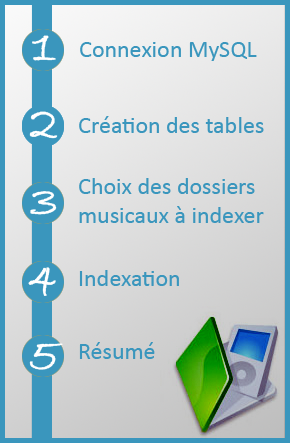
<style>
.page{position:relative;width:290px;height:443px}
.page>*{position:absolute;margin:0}
.t1{font:48px "BradleyHandITC";color:#ffffff;font-weight:bold}
.t2{font:24px "Calibri";color:#3a96bd}
</style>
<div class="page">
<p class="t1" style="left:32px;top:35px;width:24px;height:26px">1</p>
<p class="t2" style="left:80px;top:42px;width:177px;height:19px">Connexion MySQL</p>
<p class="t1" style="left:29px;top:111px;width:29px;height:28px">2</p>
<p class="t2" style="left:79px;top:116px;width:185px;height:17px">Création des tables</p>
<p class="t2" style="left:79px;top:178px;width:185px;height:45px">Choix des dossiers<br>musicaux à indexer</p>
<p class="t1" style="left:30px;top:191px;width:27px;height:24px">3</p>
<p class="t1" style="left:28px;top:267px;width:28px;height:29px">4</p>
<p class="t2" style="left:79px;top:270px;width:100px;height:16px">Indexation</p>
<p class="t2" style="left:79px;top:342px;width:76px;height:17px">Résumé</p>
<p class="t1" style="left:29px;top:343px;width:34px;height:27px">5</p>
</div>
